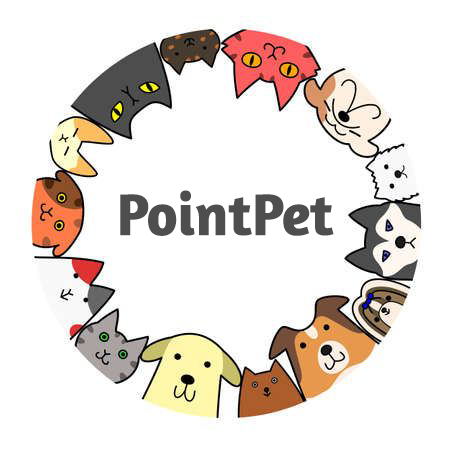
<style>
.page{position:relative;width:450px;height:450px;background:#ffffff}
.page>*{position:absolute;margin:0}
.t1{font:60px "Amaranth-Bold";color:#4e4e4e}
</style>
<div class="page">
<p class="t1" style="left:120px;top:190px;width:214px;height:46px">PointPet</p>
</div>
